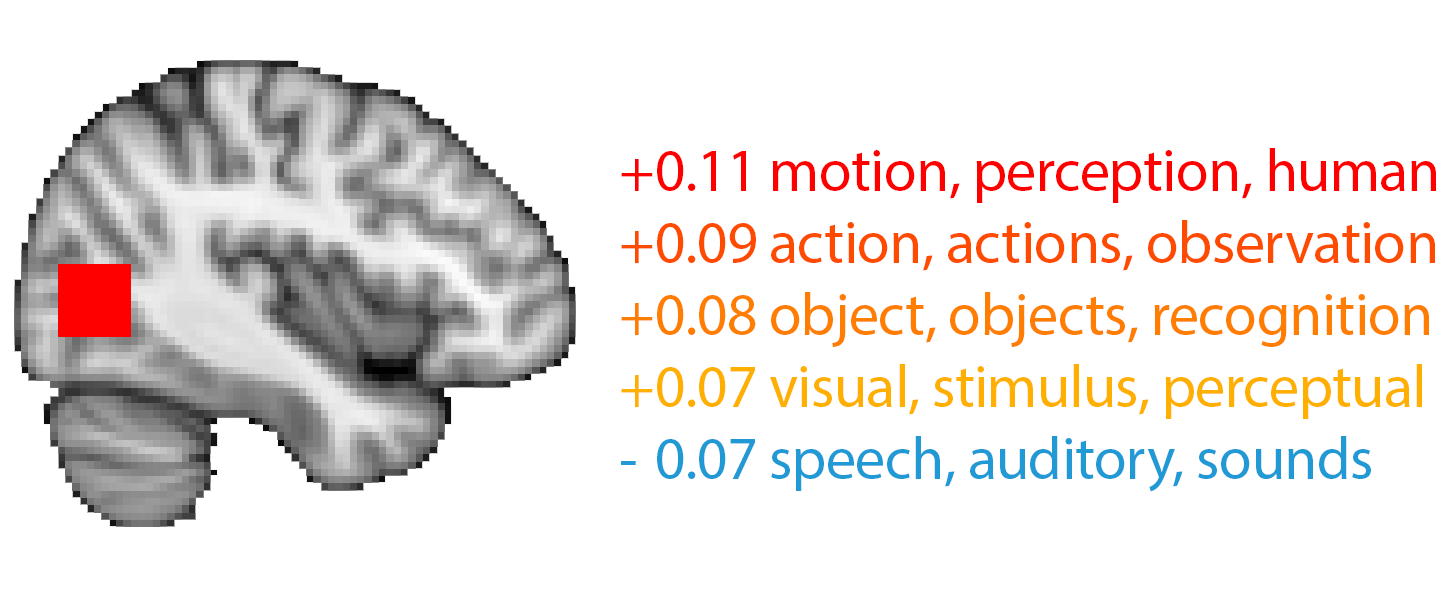
<style>
.page{position:relative;width:1440px;height:609px;background:#ffffff}
.page>*{position:absolute;margin:0}
.t1{font:60px "MyriadPro-Regular";letter-spacing:-0.01em;color:#ff4b00}
.t2{font:60px "MyriadPro-Regular";letter-spacing:-0.01em;color:#ff0000}
.t3{font:60px "MyriadPro-Regular";letter-spacing:-0.01em;color:#ff7d00}
.t4{font:60px "MyriadPro-Regular";letter-spacing:-0.01em;color:#ffaf00}
.t5{font:60px "MyriadPro-Regular";letter-spacing:-0.01em;color:#2099d5}
</style>
<div class="page">
<p class="t1" style="left:621px;top:148px;width:815px;height:344px"><span class="t2">+ 0.11 motion, perception, human<br></span>+ 0.09 action, actions, observation<br><span class="t3">+ 0.08 object, objects, recognition<br></span><span class="t4">+ 0.07 visual, stimulus, perceptual<br></span><span class="t5">-  0.07 speech, auditory, sounds</span></p>
</div>
